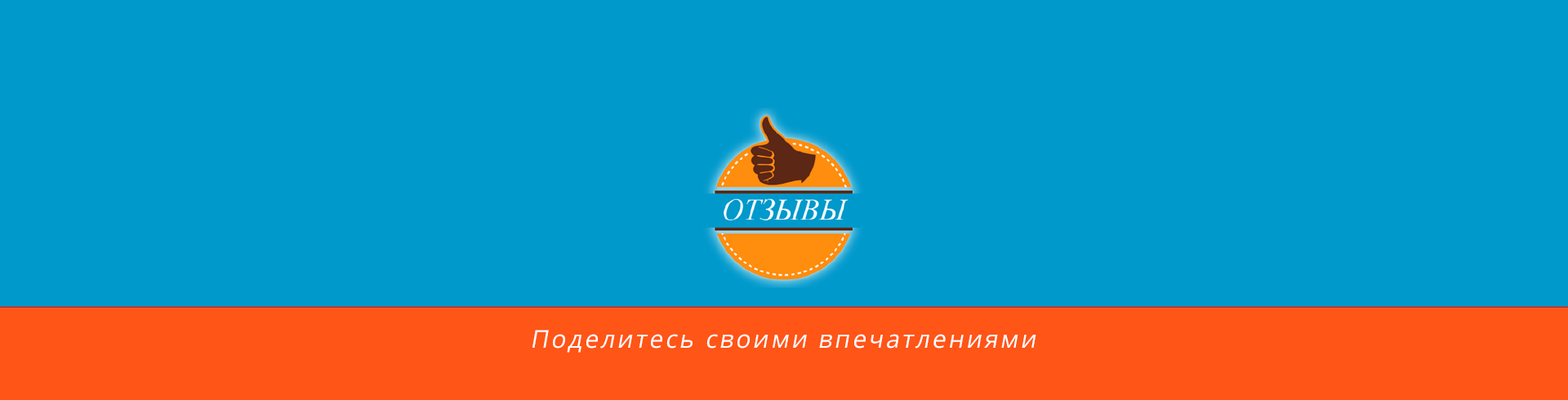
<style>
.page{position:relative;width:1568px;height:400px;background:#0099cc}
.page>*{position:absolute;margin:0}
.t1{font:24.5px "OpenSans";letter-spacing:0.1em;color:#ffffff;font-style:italic}
</style>
<div class="page">
<p class="t1" style="left:532px;top:330px;width:504px;height:23px">Поделитесь своими впечатлениями</p>
</div>
